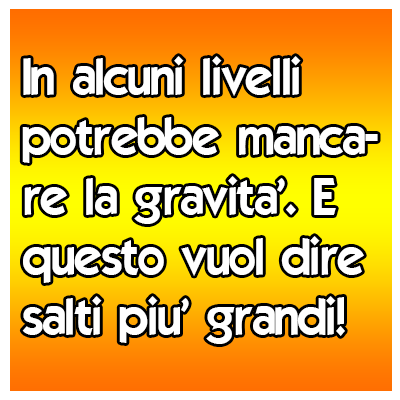
<style>
.page{position:relative;width:400px;height:400px;background:#ffffff}
.page>*{position:absolute;margin:0}
.t1{font:50px "ELEGANCE";color:#ffffff}
</style>
<div class="page">
<p class="t1" style="left:22px;top:56px;width:356px;height:288px">In alcuni livelli<br>potrebbe manca-<br>re la gravita'. E<br>questo vuol dire<br>salti piu' grandi!</p>
</div>
